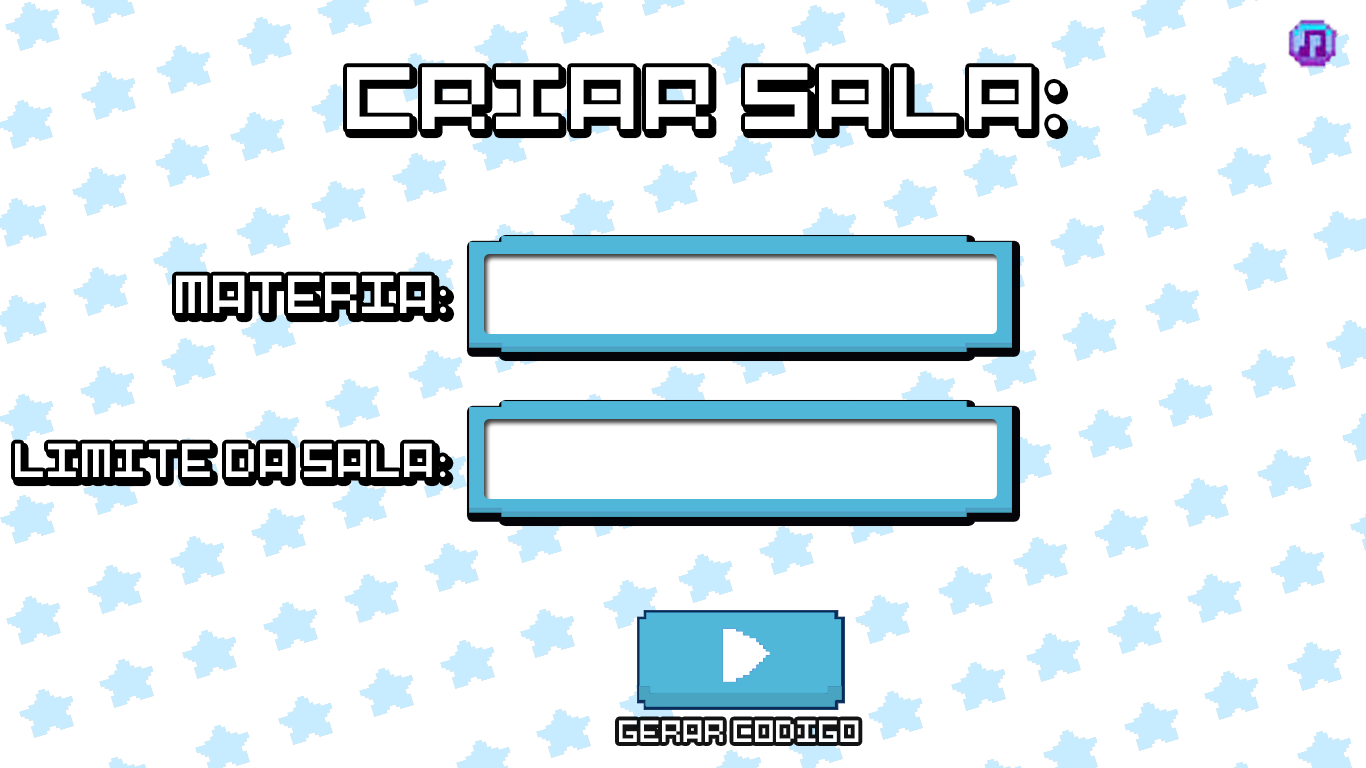
<style>
.page{position:relative;width:1366px;height:768px;background:#ffffff}
.page>*{position:absolute;margin:0}
.t1{font:98.7px "Pixel-Art";color:#ffffff}
.t2{font:98.7px "MyriadPro-Regular";color:#ffffff}
.t3{font:49.8px "Pixel-Art";color:#ffffff}
.t4{font:49.8px "MyriadPro-Regular";color:#ffffff}
.t5{font:44.4px "Pixel-Art";color:#ffffff}
.t6{font:44.4px "MyriadPro-Regular";color:#ffffff}
.t7{font:28.6px "Pixel-Art";color:#ffffff}
</style>
<div class="page">
<p class="t1" style="left:347px;top:67px;width:713px;height:63px"><span class="t2">:</span>criar sala</p>
<p class="t3" style="left:176px;top:275px;width:270px;height:38px"><span class="t4">:</span>MATERIA</p>
<p class="t5" style="left:15px;top:443px;width:431px;height:34px"><span class="t6">:</span>LIMITE DA SALA</p>
<p class="t7" style="left:619px;top:720px;width:240px;height:22px;opacity:0.97">GERAR CODIGO</p>
</div>
